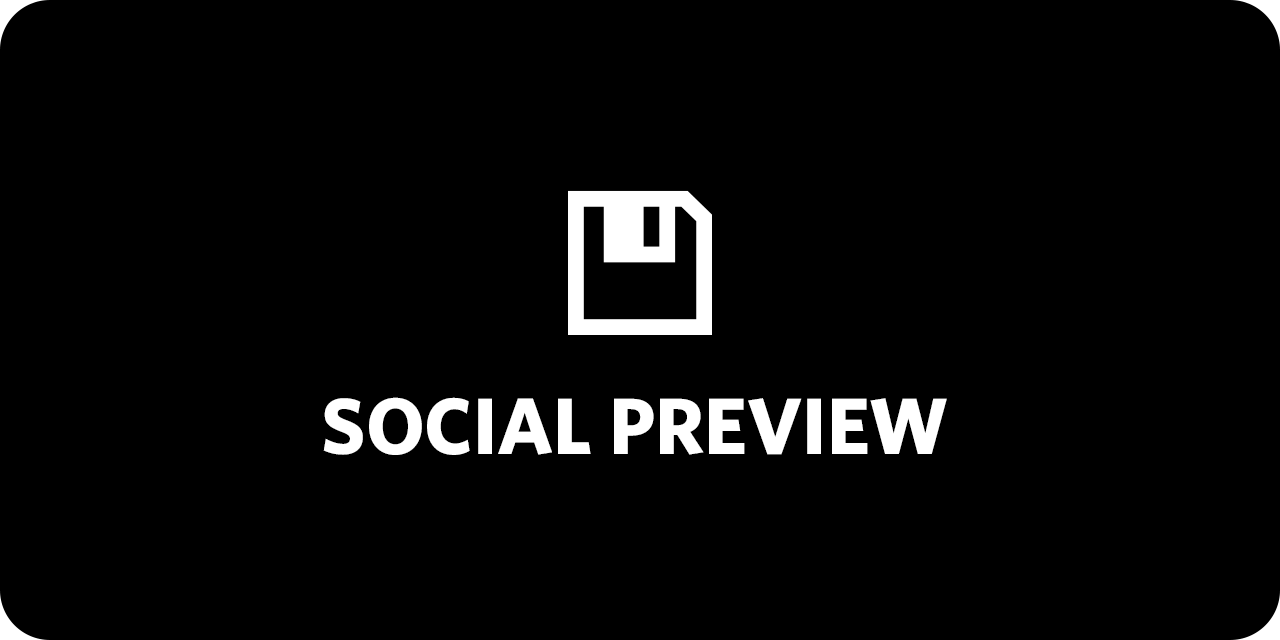
<style>
.page{position:relative;width:1280px;height:640px;background:#000000}
.page>*{position:absolute;margin:0}
.t1{font:80px "Whitney-Bold";color:#ffffff;text-transform:uppercase}
</style>
<div class="page">
<p class="t1" style="left:323px;top:397px;width:624px;height:58px">Social Preview</p>
</div>
